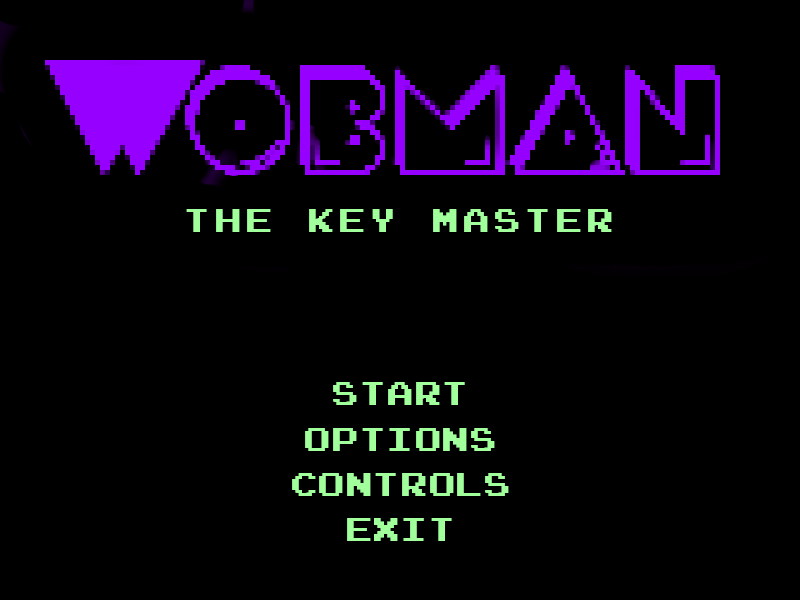
<style>
.page{position:relative;width:800px;height:600px;background:#000000}
.page>*{position:absolute;margin:0}
.t1{font:33.3px "JoystixMonospace-Regular";letter-spacing:0.1em;color:#a1ff9c}
.t2{font:33.3px "JoystixMonospace-Regular";color:#a1ff9c}
</style>
<div class="page">
<p class="t1" style="left:186px;top:209px;width:426px;height:23px">THE KEY MASTER</p>
<p class="t2" style="left:333px;top:382px;width:132px;height:23px">Start</p>
<p class="t2" style="left:305px;top:428px;width:190px;height:23px">options</p>
<p class="t2" style="left:292px;top:473px;width:217px;height:23px">Controls</p>
<p class="t2" style="left:347px;top:518px;width:105px;height:23px">EXIT</p>
</div>
